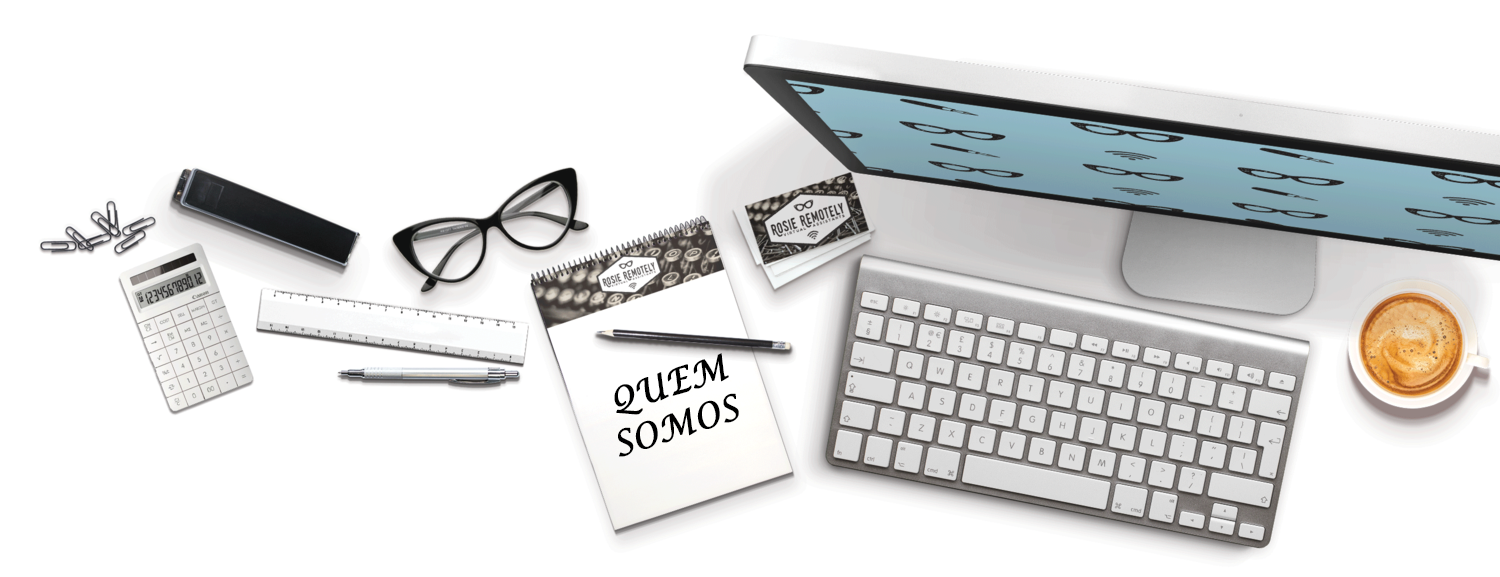
<style>
.page{position:relative;width:1500px;height:577px;background:#ffffff}
.page>*{position:absolute;margin:0}
.t1{font:34.5px "LucidaCalligraphy-Italic";color:#000000;font-weight:bold;scale:0.94 1}
</style>
<div class="page">
<p class="t1" style="left:614px;top:353px;width:125px;height:104px;text-align:center;rotate:-18deg">QUEM<br>SOMOS</p>
</div>
